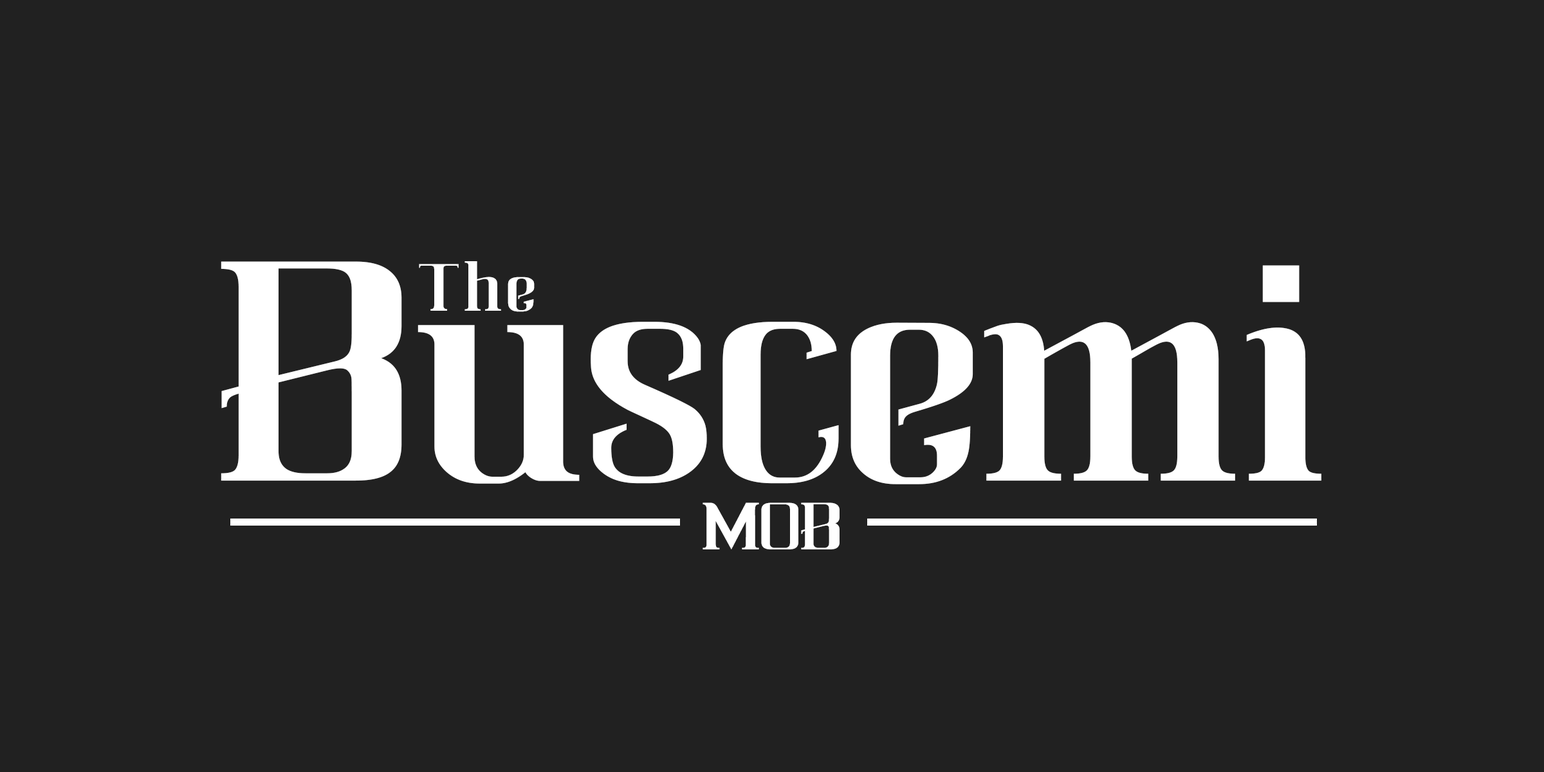
<style>
.page{position:relative;width:1544px;height:772px;background:#212121}
.page>*{position:absolute;margin:0}
.t1{font:302.4px "NOh-Carbone";color:#ffffff}
.t2{font:64.3px "NOh-Carbone";letter-spacing:0.075em;color:#ffffff}
.t3{font:64.3px "NOh-Carbone";color:#ffffff}
</style>
<div class="page">
<p class="t1" style="left:221px;top:261px;width:1101px;height:224px">Buscemi</p>
<p class="t2" style="left:419px;top:261px;width:116px;height:51px">The</p>
<p class="t3" style="left:703px;top:503px;width:137px;height:47px">MOB</p>
</div>
